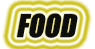
<style>
.page{position:relative;width:95px;height:49px}
.page>*{position:absolute;margin:0}
.t1{font:29px "Impact";color:#000000;font-style:italic}
</style>
<div class="page">
<p class="t1" style="left:17px;top:13px;width:61px;height:25px;opacity:0.95">FOOD</p>
</div>
